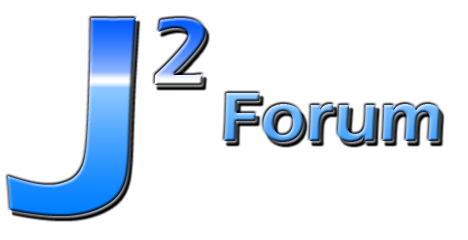
<style>
.page{position:relative;width:468px;height:240px;background:#ffffff}
.page>*{position:absolute;margin:0}
.t1{font:71.8px "ErasITC-Demi"}
.t2{font:293px "ErasITC-Demi"}
.t3{font:170px "ErasITC-Demi"}
</style>
<div class="page">
<p class="t1" style="left:7px;top:17px;width:433px;height:199px"><span class="t2">J</span><span class="t3">2 </span>Forum</p>
</div>
